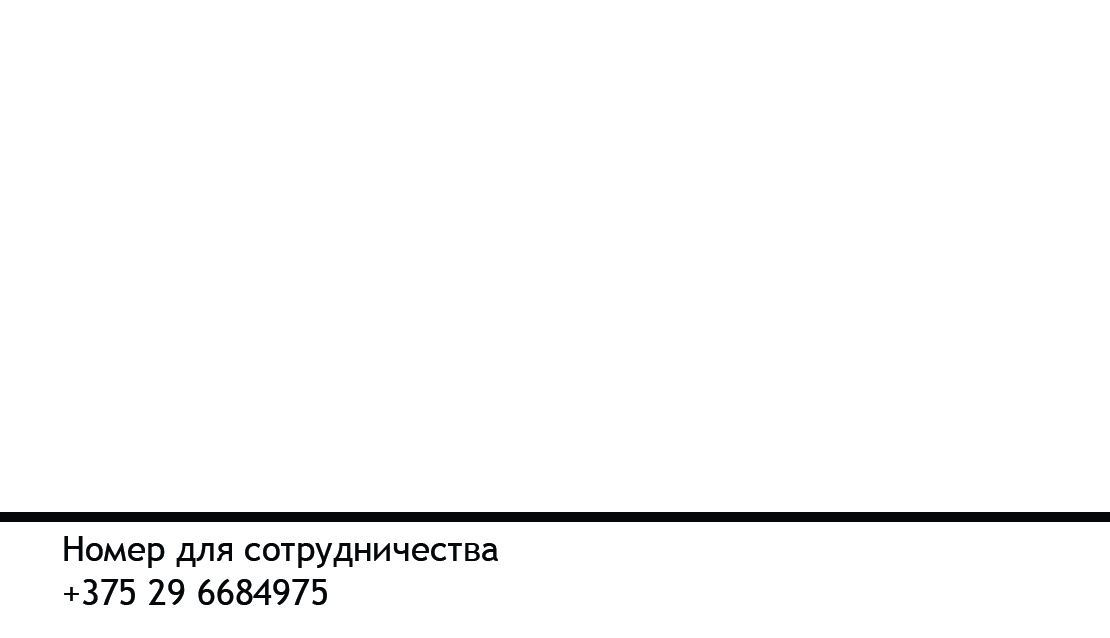
<style>
.page{position:relative;width:1110px;height:638px;background:#ffffff}
.page>*{position:absolute;margin:0}
.t1{font:34.8px "TrebuchetMS";color:#050708}
.t2{font:36px "TrebuchetMS";color:#050708}
</style>
<div class="page">
<p class="t1" style="left:64px;top:536px;width:434px;height:32px">Номер для сотрудничества</p>
<p class="t2" style="left:64px;top:579px;width:263px;height:26px">+375 29 6684975</p>
</div>
